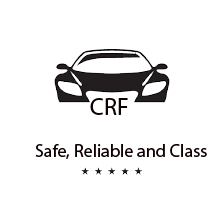
<style>
.page{position:relative;width:224px;height:224px;background:#ffffff}
.page>*{position:absolute;margin:0}
.t1{font:24px "MyriadPro-Regular";color:#0e0000}
.t2{font:18px "MyriadPro-Regular";color:#0e0000}
</style>
<div class="page">
<p class="t1" style="left:90px;top:98px;width:38px;height:17px">CRF</p>
<p class="t2" style="left:35px;top:144px;width:172px;height:15px">Safe, Reliable and Class</p>
</div>
